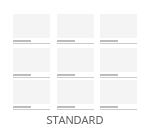
<style>
.page{position:relative;width:150px;height:130px;background:#ffffff}
.page>*{position:absolute;margin:0}
.t1{font:11px "OpenSans";color:#686868;text-transform:uppercase}
</style>
<div class="page">
<p class="t1" style="left:46px;top:116px;width:57px;height:8px">Standard</p>
</div>
